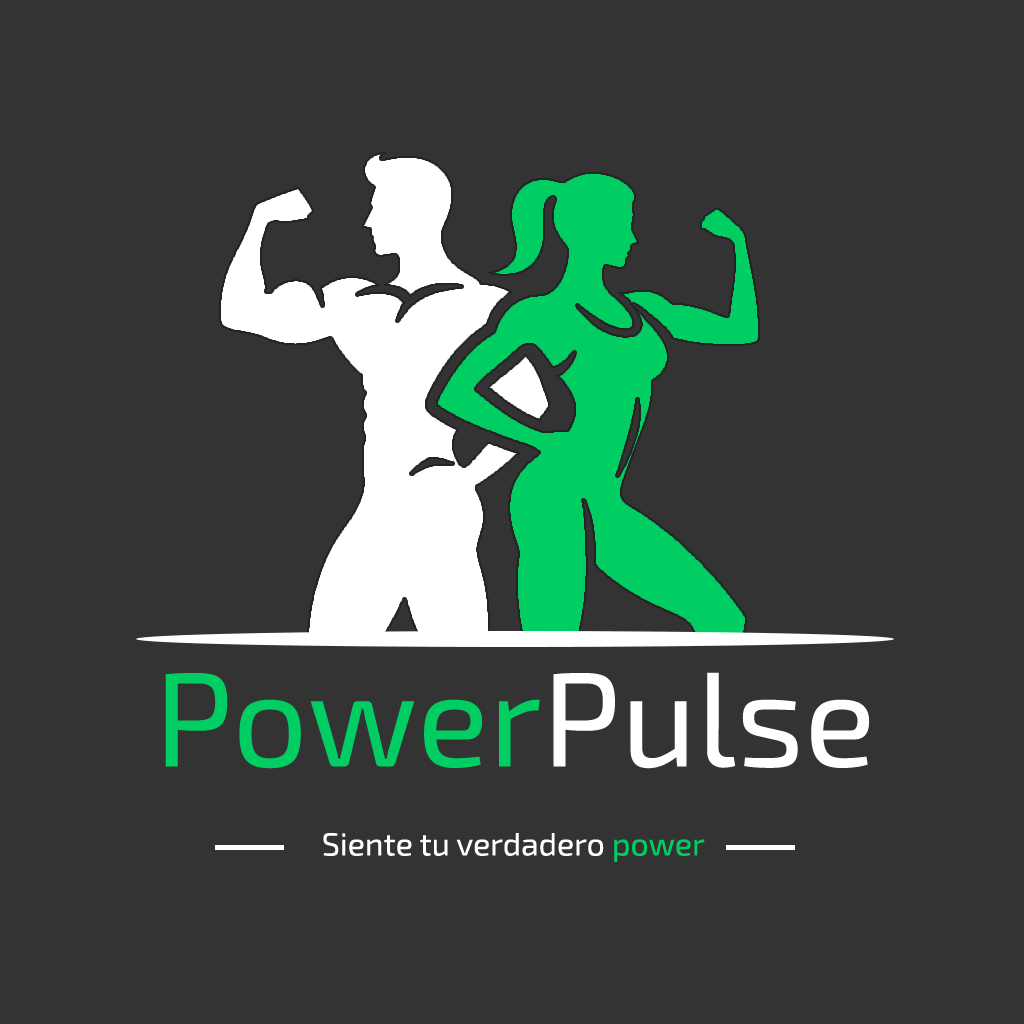
<style>
.page{position:relative;width:1024px;height:1024px;background:#333333}
.page>*{position:absolute;margin:0}
.t1{font:133.3px "Exo2-Regular";color:#00ce63}
.t2{font:133.3px "Exo2-Regular";color:#ffffff}
.t3{font:32px "Exo2-Regular";color:#ffffff}
.t4{font:32px "Exo2-Regular";color:#00ce63}
</style>
<div class="page">
<p class="t1" style="left:165px;top:672px;width:705px;height:97px">Power<span class="t2">Pulse</span></p>
<p class="t3" style="left:323px;top:833px;width:382px;height:29px">Siente tu verdadero <span class="t4">power</span></p>
</div>
